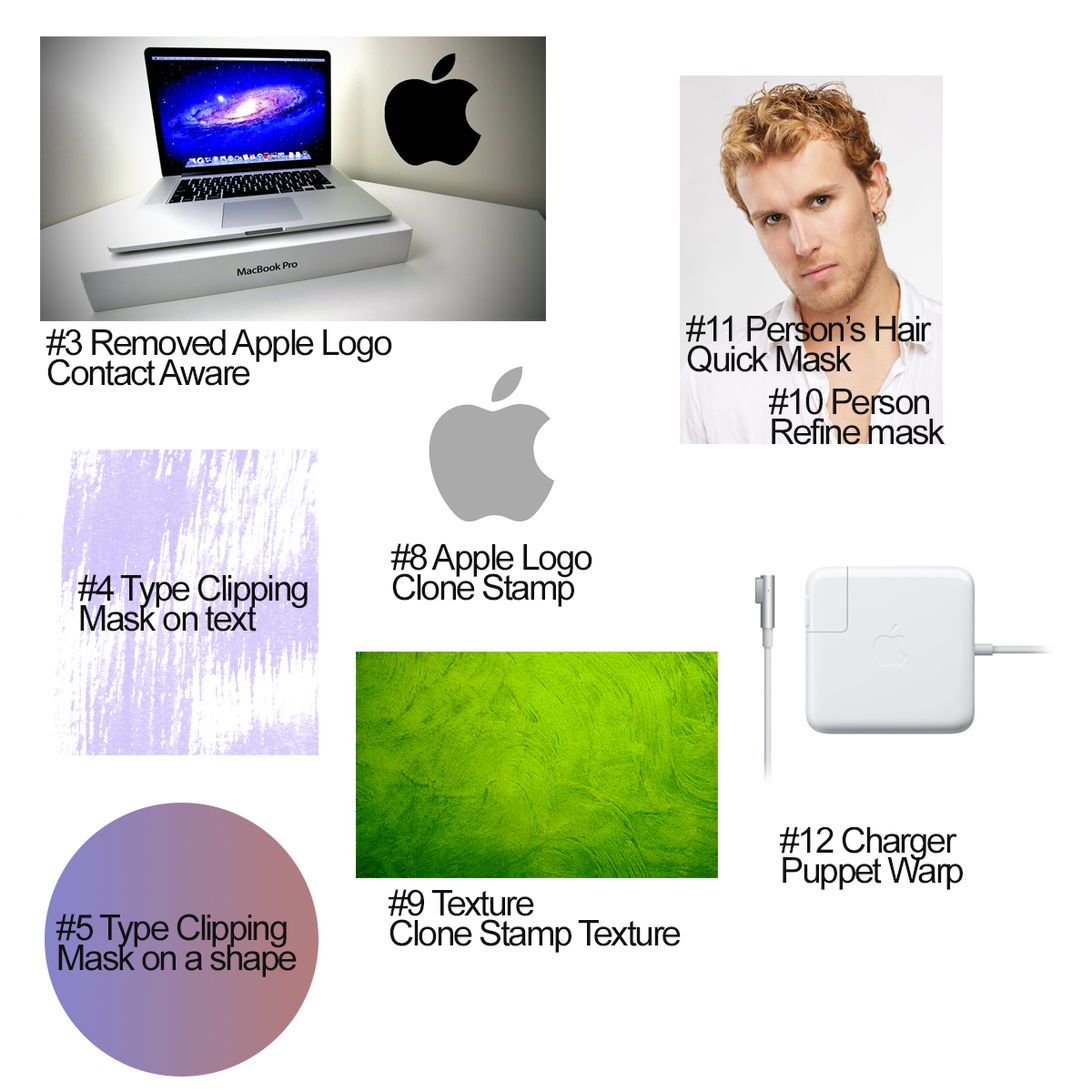
<style>
.page{position:relative;width:1092px;height:1092px;background:#ffffff}
.page>*{position:absolute;margin:0}
.t1{font:35.5px/30px "ArialMT";letter-spacing:-0.06em;color:#111111}
</style>
<div class="page">
<p class="t1" style="left:686px;top:315px;width:246px;height:59px">#11 Person’s Hair<br>Quick Mask</p>
<p class="t1" style="left:46px;top:329px;width:346px;height:57px">#3 Removed Apple Logo <br>Contact Aware</p>
<p class="t1" style="left:769px;top:388px;width:176px;height:57px">#10 Person<br>Refine mask</p>
<p class="t1" style="left:391px;top:543px;width:201px;height:64px">#8 Apple Logo <br>Clone Stamp</p>
<p class="t1" style="left:78px;top:574px;width:230px;height:58px">#4 Type Clipping<br>Mask on text</p>
<p class="t1" style="left:780px;top:826px;width:183px;height:64px">#12 Charger<br>Puppet Warp</p>
<p class="t1" style="left:389px;top:889px;width:292px;height:64px">#9 Texture<br>Clone Stamp Texture</p>
<p class="t1" style="left:56px;top:914px;width:241px;height:63px">#5 Type Clipping<br>Mask on a shape</p>
</div>
